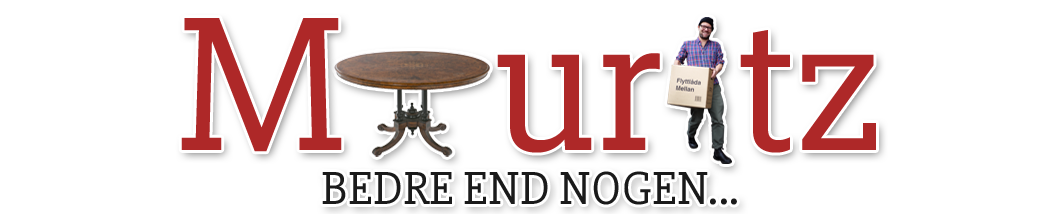
<style>
.page{position:relative;width:1050px;height:214px;background:#ffffff}
.page>*{position:absolute;margin:0}
.t1{font:198px "Slabo27px-Regular";color:#ae2828}
.t2{font:48px "Slabo27px-Regular";color:#1a1a1a;text-transform:uppercase}
</style>
<div class="page">
<p class="t1" style="left:181px;top:18px;width:695px;height:135px">M    ur  tz</p>
<p class="t2" style="left:322px;top:171px;width:415px;height:34px">bedre end nogen...</p>
</div>
